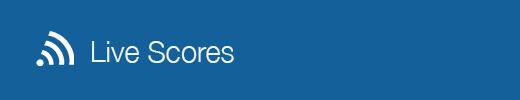
<style>
.page{position:relative;width:520px;height:100px;background:#13609b}
.page>*{position:absolute;margin:0}
.t1{font:29px "HelveticaNeue-Light";color:#edf7ff}
</style>
<div class="page">
<p class="t1" style="left:92px;top:41px;width:142px;height:22px">Live Scores</p>
</div>
